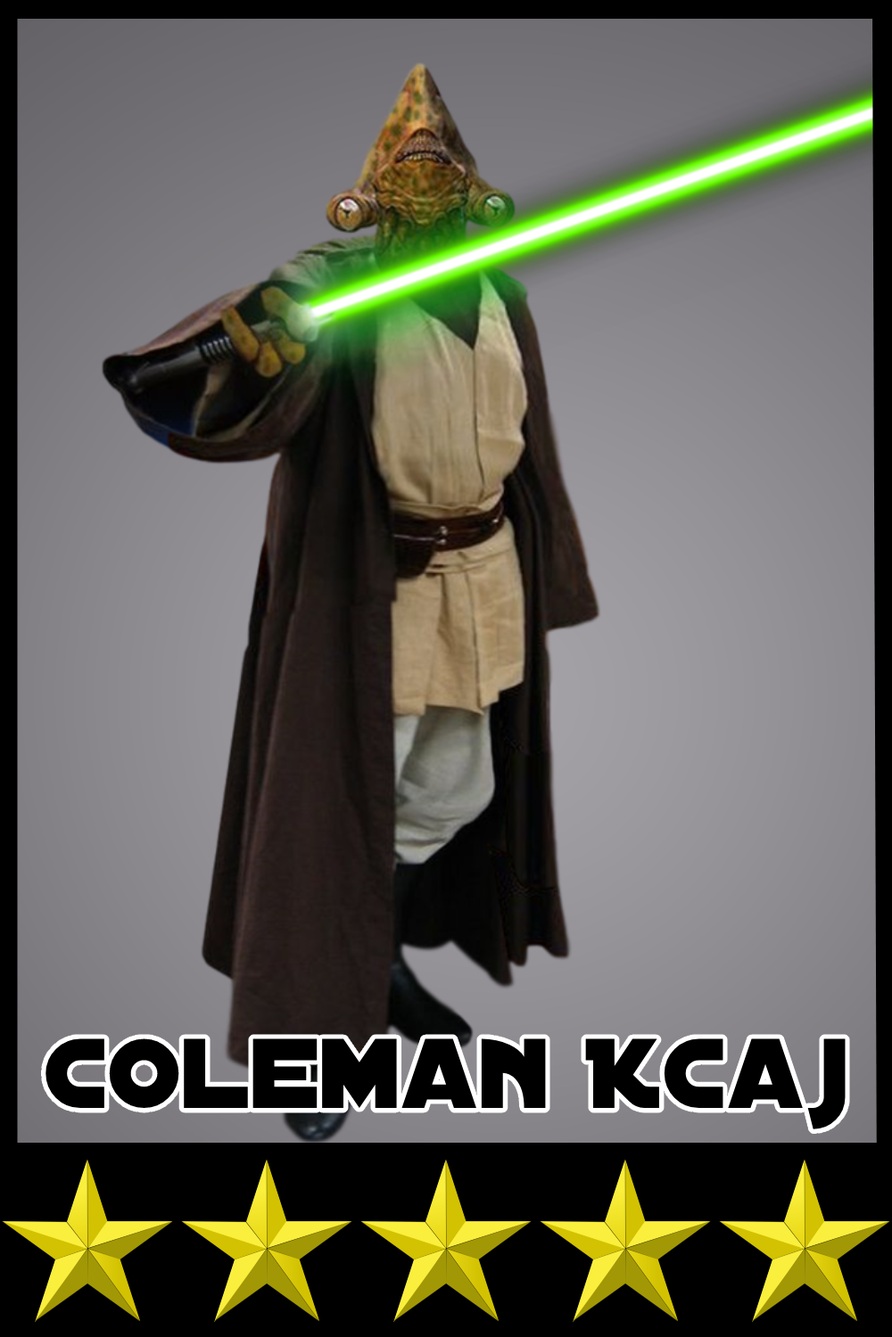
<style>
.page{position:relative;width:892px;height:1337px}
.page>*{position:absolute;margin:0}
.t1{font:106.2px "DistantGalaxy";color:#000000}
</style>
<div class="page">
<p class="t1" style="left:45px;top:1039px;width:800px;height:91px">Coleman Kcaj</p>
</div>
